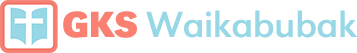
<style>
.page{position:relative;width:357px;height:53px;background:#ffffff}
.page>*{position:absolute;margin:0}
.t1{font:37.7px "URWGroteskWid-Regular3";letter-spacing:-0.02em;color:#98d8e6}
.t2{font:37.7px "URWGrotesk-Regular4";letter-spacing:-0.02em;color:#fa8072}
</style>
<div class="page">
<p class="t1" style="left:63px;top:10px;width:294px;height:28px"><span class="t2">GKS </span>Waikabubak</p>
</div>
